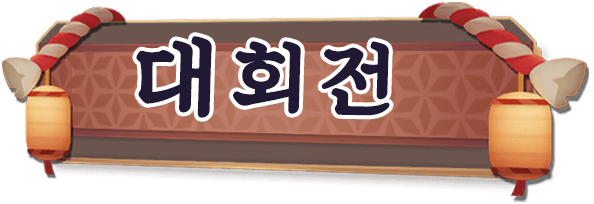
<style>
.page{position:relative;width:594px;height:204px;background:#ffffff}
.page>*{position:absolute;margin:0}
.t1{font:80.9px "SDKukdetopokki-aLt";letter-spacing:0.14em;color:#211933;font-weight:bold}
.t2{font:90.9px "SDKukdetopokki-aLt";letter-spacing:0.14em;color:#211933;font-weight:bold}
</style>
<div class="page">
<p class="t1" style="left:136px;top:36px;width:254px;height:82px;rotate:1deg"><span class="t2">대</span>회전</p>
</div>
